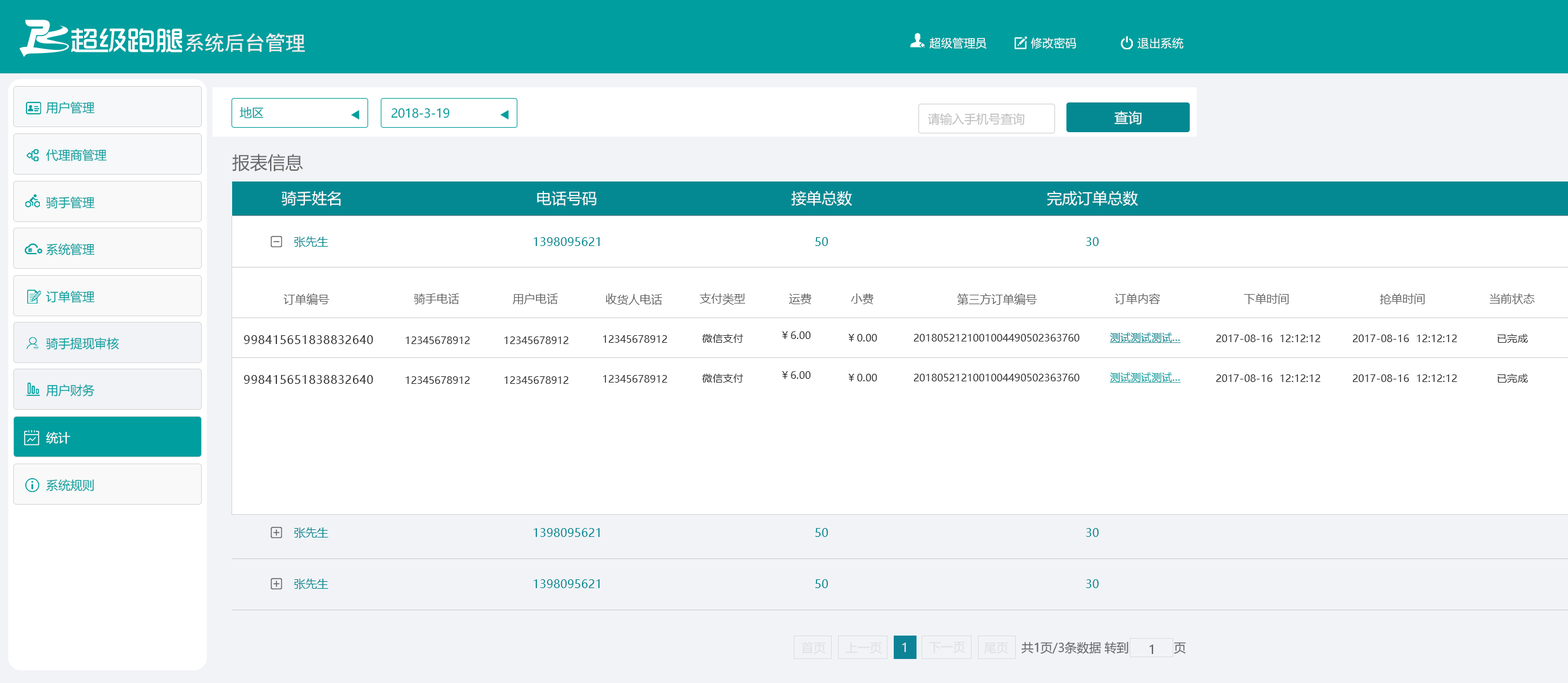
<style>
.page{position:relative;width:1568px;height:683px;background:#ffffff}
.page>*{position:absolute;margin:0}
.t1{font:20.3px "SimHei";color:#f0f0f0}
.t2{font:11.4px "MicrosoftYaHei";color:#ffffff}
.t3{font:12.1px "MicrosoftYaHei";color:#009e9e}
.t4{font:12.1px "MicrosoftYaHei";color:#bebebe}
.t5{font:13.9px "MicrosoftYaHei";color:#ffffff}
.t6{font:17.7px "MicrosoftYaHei";color:#646464}
.t7{font:15.2px "MicrosoftYaHei";color:#ffffff}
.t8{font:11.4px "MicrosoftYaHei";color:#048992}
.t9{font:11.4px "MicrosoftYaHei";color:#666666}
.t10{font:11.4px "MicrosoftYaHei";letter-spacing:0.025em;color:#333333}
.t11{font:10.1px "MicrosoftYaHei";letter-spacing:0.025em;color:#333333}
.t12{font:10.1px "MicrosoftYaHei";letter-spacing:0.025em;color:#048992;text-decoration:underline}
.t13{font:10.1px "MicrosoftYaHei";letter-spacing:0.025em;color:#009e9e;text-decoration:underline}
.t14{font:12.1px "MicrosoftYaHei";color:#ffffff}
.t15{font:12.1px "MicrosoftYaHei";color:#e0e0e0}
.t16{font:12.1px "MicrosoftYaHei";color:#646464}
</style>
<div class="page">
<p class="t1" style="left:185px;top:33px;width:120px;height:19px">系统后台管理</p>
<p class="t2" style="left:929px;top:37px;width:254px;height:12px">超级管理员             修改密码                  退出系统</p>
<p class="t3" style="left:46px;top:101px;width:49px;height:13px">用户管理</p>
<p class="t3" style="left:240px;top:106px;width:24px;height:12px">地区</p>
<p class="t3" style="left:391px;top:108px;width:59px;height:10px">2018-3-19</p>
<p class="t4" style="left:928px;top:113px;width:97px;height:12px">请输入手机号查询</p>
<p class="t5" style="left:1114px;top:111px;width:28px;height:14px">查询</p>
<p class="t3" style="left:46px;top:149px;width:61px;height:12px">代理商管理</p>
<p class="t6" style="left:232px;top:154px;width:71px;height:17px">报表信息</p>
<p class="t3" style="left:46px;top:196px;width:49px;height:13px">骑手管理</p>
<p class="t7" style="left:281px;top:191px;width:60px;height:15px">骑手姓名</p>
<p class="t7" style="left:537px;top:191px;width:59px;height:15px">电话号码</p>
<p class="t7" style="left:791px;top:191px;width:61px;height:15px">接单总数</p>
<p class="t7" style="left:1047px;top:191px;width:91px;height:15px">完成订单总数</p>
<p class="t3" style="left:46px;top:243px;width:49px;height:13px">系统管理</p>
<p class="t8" style="left:294px;top:237px;width:34px;height:10px">张先生</p>
<p class="t8" style="left:533px;top:237px;width:67px;height:9px">1398095621</p>
<p class="t8" style="left:815px;top:237px;width:13px;height:9px">50</p>
<p class="t8" style="left:1086px;top:237px;width:13px;height:9px">30</p>
<p class="t3" style="left:46px;top:290px;width:49px;height:13px">订单管理</p>
<p class="t9" style="left:283px;top:293px;width:47px;height:12px">订单编号</p>
<p class="t9" style="left:414px;top:293px;width:45px;height:11px">骑手电话</p>
<p class="t9" style="left:513px;top:293px;width:45px;height:11px">用户电话</p>
<p class="t9" style="left:606px;top:293px;width:56px;height:12px">收货人电话</p>
<p class="t9" style="left:700px;top:293px;width:45px;height:12px">支付类型</p>
<p class="t9" style="left:789px;top:293px;width:23px;height:11px">运费</p>
<p class="t9" style="left:851px;top:293px;width:23px;height:11px">小费</p>
<p class="t9" style="left:957px;top:293px;width:80px;height:12px">第三方订单编号</p>
<p class="t9" style="left:1114px;top:293px;width:46px;height:11px">订单内容</p>
<p class="t9" style="left:1244px;top:293px;width:45px;height:11px">下单时间</p>
<p class="t9" style="left:1380px;top:293px;width:45px;height:11px">抢单时间</p>
<p class="t9" style="left:1490px;top:293px;width:44px;height:11px">当前状态</p>
<p class="t3" style="left:46px;top:337px;width:73px;height:13px">骑手提现审核</p>
<p class="t10" style="left:244px;top:335px;width:129px;height:9px">998415651838832640</p>
<p class="t11" style="left:405px;top:336px;width:65px;height:8px">12345678912</p>
<p class="t11" style="left:504px;top:336px;width:65px;height:8px">12345678912</p>
<p class="t11" style="left:603px;top:335px;width:64px;height:8px">12345678912</p>
<p class="t11" style="left:702px;top:334px;width:41px;height:9px">微信支付</p>
<p class="t11" style="left:782px;top:331px;width:29px;height:8px">￥6.00</p>
<p class="t11" style="left:848px;top:334px;width:29px;height:8px">￥0.00</p>
<p class="t11" style="left:914px;top:334px;width:166px;height:8px">2018052121001004490502363760</p>
<p class="t12" style="left:1109px;top:333px;width:72px;height:10px">测试测试测试...</p>
<p class="t11" style="left:1216px;top:335px;width:105px;height:7px">2017-08-16  12:12:12</p>
<p class="t11" style="left:1353px;top:335px;width:104px;height:7px">2017-08-16  12:12:12</p>
<p class="t11" style="left:1497px;top:334px;width:31px;height:9px">已完成</p>
<p class="t10" style="left:244px;top:375px;width:129px;height:9px">998415651838832640</p>
<p class="t11" style="left:405px;top:376px;width:65px;height:8px">12345678912</p>
<p class="t11" style="left:504px;top:376px;width:65px;height:8px">12345678912</p>
<p class="t11" style="left:603px;top:375px;width:64px;height:8px">12345678912</p>
<p class="t11" style="left:702px;top:374px;width:41px;height:9px">微信支付</p>
<p class="t11" style="left:782px;top:371px;width:29px;height:8px">￥6.00</p>
<p class="t11" style="left:848px;top:374px;width:29px;height:7px">￥0.00</p>
<p class="t11" style="left:914px;top:374px;width:166px;height:7px">2018052121001004490502363760</p>
<p class="t13" style="left:1109px;top:373px;width:72px;height:10px">测试测试测试...</p>
<p class="t11" style="left:1216px;top:374px;width:105px;height:8px">2017-08-16  12:12:12</p>
<p class="t11" style="left:1353px;top:374px;width:104px;height:8px">2017-08-16  12:12:12</p>
<p class="t11" style="left:1497px;top:374px;width:31px;height:9px">已完成</p>
<p class="t3" style="left:46px;top:384px;width:49px;height:13px">用户财务</p>
<p class="t14" style="left:46px;top:431px;width:24px;height:13px">统计</p>
<p class="t3" style="left:46px;top:479px;width:48px;height:12px">系统规则</p>
<p class="t8" style="left:294px;top:528px;width:34px;height:10px">张先生</p>
<p class="t8" style="left:533px;top:528px;width:67px;height:9px">1398095621</p>
<p class="t8" style="left:815px;top:528px;width:13px;height:9px">50</p>
<p class="t8" style="left:1086px;top:528px;width:13px;height:9px">30</p>
<p class="t8" style="left:294px;top:579px;width:34px;height:11px">张先生</p>
<p class="t8" style="left:533px;top:579px;width:67px;height:9px">1398095621</p>
<p class="t8" style="left:815px;top:579px;width:13px;height:9px">50</p>
<p class="t8" style="left:1086px;top:579px;width:13px;height:9px">30</p>
<p class="t15" style="left:929px;top:641px;width:36px;height:12px">下一页</p>
<p class="t16" style="left:1021px;top:641px;width:165px;height:13px">共1页/3条数据 转到             页</p>
<p class="t15" style="left:801px;top:642px;width:24px;height:12px">首页</p>
<p class="t15" style="left:846px;top:642px;width:36px;height:12px">上一页</p>
<p class="t15" style="left:902px;top:643px;width:4px;height:10px">1</p>
<p class="t15" style="left:984px;top:642px;width:24px;height:12px">尾页</p>
<p class="t16" style="left:1149px;top:645px;width:5px;height:10px">1</p>
</div>
